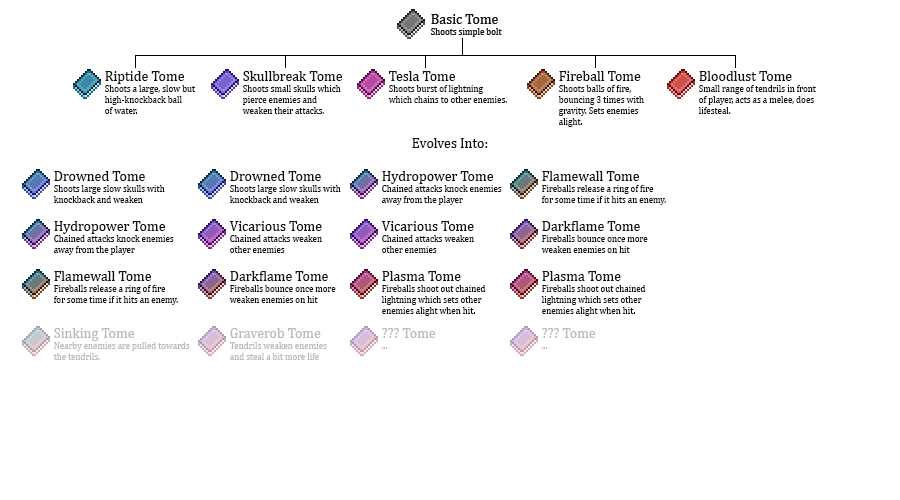
<style>
.page{position:relative;width:900px;height:500px;background:#ffffff}
.page>*{position:absolute;margin:0}
.t1{font:9px "CambriaMath";color:#111111}
.t2{font:14px "CambriaMath";color:#111111}
.t3{font:9px "CambriaMath";color:#bababa}
.t4{font:14px "CambriaMath";color:#bababa}
</style>
<div class="page">
<p class="t1" style="left:104px;top:71px;width:92px;height:43px"><span class="t2">Riptide Tome<br></span>Shoots a large, slow but <br>high-knockback ball <br>of water.</p>
<p class="t1" style="left:242px;top:71px;width:101px;height:43px"><span class="t2">Skullbreak Tome<br></span>Shoots small skulls which <br>pierce enemies and<br>weaken their attacks.</p>
<p class="t1" style="left:388px;top:71px;width:119px;height:32px"><span class="t2">Tesla Tome<br></span>Shoots burst of lightning<br>which chains to other enemies.</p>
<p class="t1" style="left:558px;top:71px;width:86px;height:56px"><span class="t2">Fireball Tome<br></span>Shoots balls of fire,<br>bouncing 3 times with<br>gravity. Sets enemies<br>alight.</p>
<p class="t1" style="left:698px;top:71px;width:118px;height:43px"><span class="t2">Bloodlust Tome<br></span>Small range of tendrils in front<br>of player, acts as a melee, does<br>lifesteal.</p>
<p class="t2" style="left:412px;top:138px;width:76px;height:10px">Evolves Into:</p>
<p class="t1" style="left:53px;top:171px;width:112px;height:32px"><span class="t2">Drowned Tome<br></span>Shoots large slow skulls with<br>knockback and weaken</p>
<p class="t1" style="left:229px;top:171px;width:112px;height:32px"><span class="t2">Drowned Tome<br></span>Shoots large slow skulls with<br>knockback and weaken</p>
<p class="t1" style="left:382px;top:171px;width:120px;height:34px"><span class="t2">Hydropower Tome<br></span>Chained attacks knock enemies<br>away from the player</p>
<p class="t1" style="left:542px;top:171px;width:124px;height:34px"><span class="t2">Flamewall Tome<br></span>Fireballs release a ring of fire<br>for some time if it hits an enemy.</p>
<p class="t1" style="left:54px;top:221px;width:120px;height:34px"><span class="t2">Hydropower Tome<br></span>Chained attacks knock enemies<br>away from the player</p>
<p class="t1" style="left:229px;top:221px;width:93px;height:32px"><span class="t2">Vicarious Tome<br></span>Chained attacks weaken<br>other enemies</p>
<p class="t1" style="left:381px;top:221px;width:93px;height:32px"><span class="t2">Vicarious Tome<br></span>Chained attacks weaken<br>other enemies</p>
<p class="t1" style="left:541px;top:221px;width:107px;height:32px"><span class="t2">Darkflame Tome<br></span>Fireballs bounce once more<br>weaken enemies on hit</p>
<p class="t1" style="left:54px;top:271px;width:124px;height:34px"><span class="t2">Flamewall Tome<br></span>Fireballs release a ring of fire<br>for some time if it hits an enemy.</p>
<p class="t1" style="left:229px;top:271px;width:107px;height:32px"><span class="t2">Darkflame Tome<br></span>Fireballs bounce once more<br>weaken enemies on hit</p>
<p class="t1" style="left:381px;top:271px;width:105px;height:45px"><span class="t2">Plasma Tome<br></span>Fireballs shoot out chained<br>lightning which sets other<br>enemies alight when hit.</p>
<p class="t1" style="left:541px;top:271px;width:105px;height:45px"><span class="t2">Plasma Tome<br></span>Fireballs shoot out chained<br>lightning which sets other<br>enemies alight when hit.</p>
<p class="t3" style="left:53px;top:328px;width:137px;height:32px"><span class="t4">Sinking Tome<br></span>Nearby enemies are pulled towards<br>the tendrils.</p>
<p class="t3" style="left:229px;top:328px;width:98px;height:32px"><span class="t4">Graverob Tome<br></span>Tendrils weaken enemies<br>and steal a bit more life</p>
<p class="t4" style="left:382px;top:328px;width:54px;height:21px">??? Tome<br><span class="t3">...</span></p>
<p class="t4" style="left:542px;top:328px;width:54px;height:21px">??? Tome<br><span class="t3">...</span></p>
</div>
